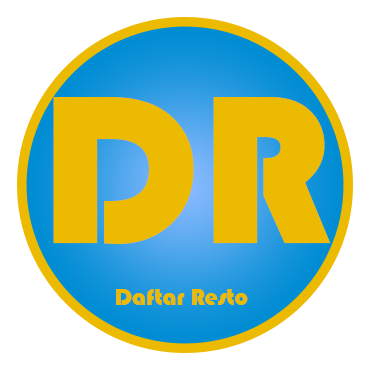
<style>
.page{position:relative;width:370px;height:369px;background:#ffffff}
.page>*{position:absolute;margin:0}
.t1{font:218.6px "Bauhaus93";color:#edba02}
.t2{font:24px "Bauhaus93";color:#edba02}
</style>
<div class="page">
<p class="t1" style="left:53px;top:97px;width:278px;height:147px">DR</p>
<p class="t2" style="left:116px;top:289px;width:132px;height:16px">Daftar Resto</p>
</div>
